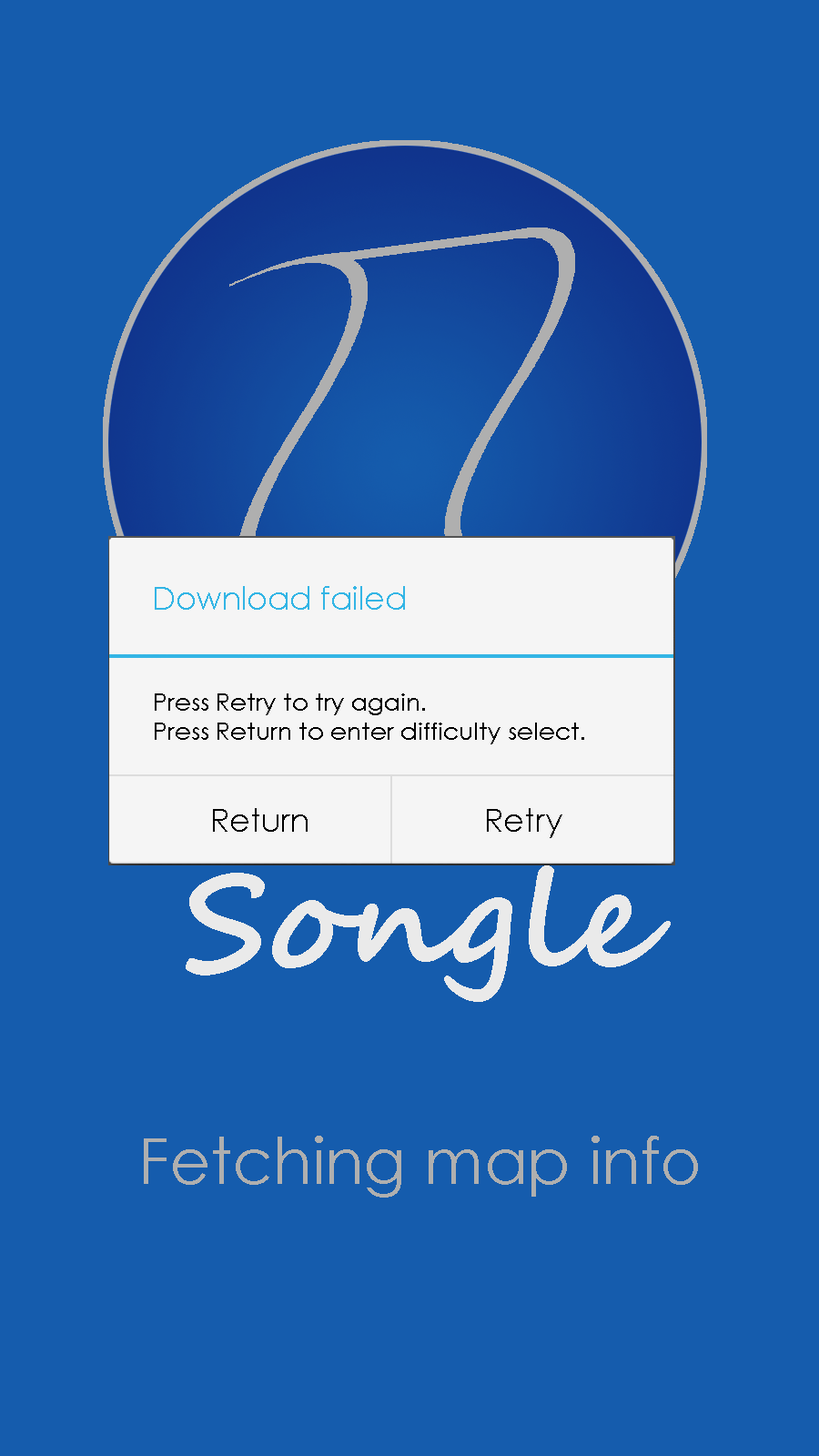
<style>
.page{position:relative;width:819px;height:1456px;background:#155cad}
.page>*{position:absolute;margin:0}
.t1{font:31.8px "CenturyGothic";color:#33b5e5}
.t2{font:24.6px "CenturyGothic";color:#000000}
.t3{font:31.8px "CenturyGothic";color:#000000}
.t4{font:136.5px "SegoeScript-Bold";color:#eaeaea}
.t5{font:63.7px "CenturyGothic";color:#afafaf}
</style>
<div class="page">
<p class="t1" style="left:155px;top:586px;width:250px;height:24px">Download failed</p>
<p class="t2" style="left:155px;top:693px;width:429px;height:51px">Press Retry to try again.<br>Press Return to enter difficulty select.</p>
<p class="t3" style="left:213px;top:808px;width:95px;height:24px">Return</p>
<p class="t3" style="left:487px;top:808px;width:75px;height:30px">Retry</p>
<p class="t4" style="left:186px;top:865px;width:485px;height:137px">Songle</p>
<p class="t5" style="left:144px;top:1136px;width:554px;height:62px">Fetching map info</p>
</div>
